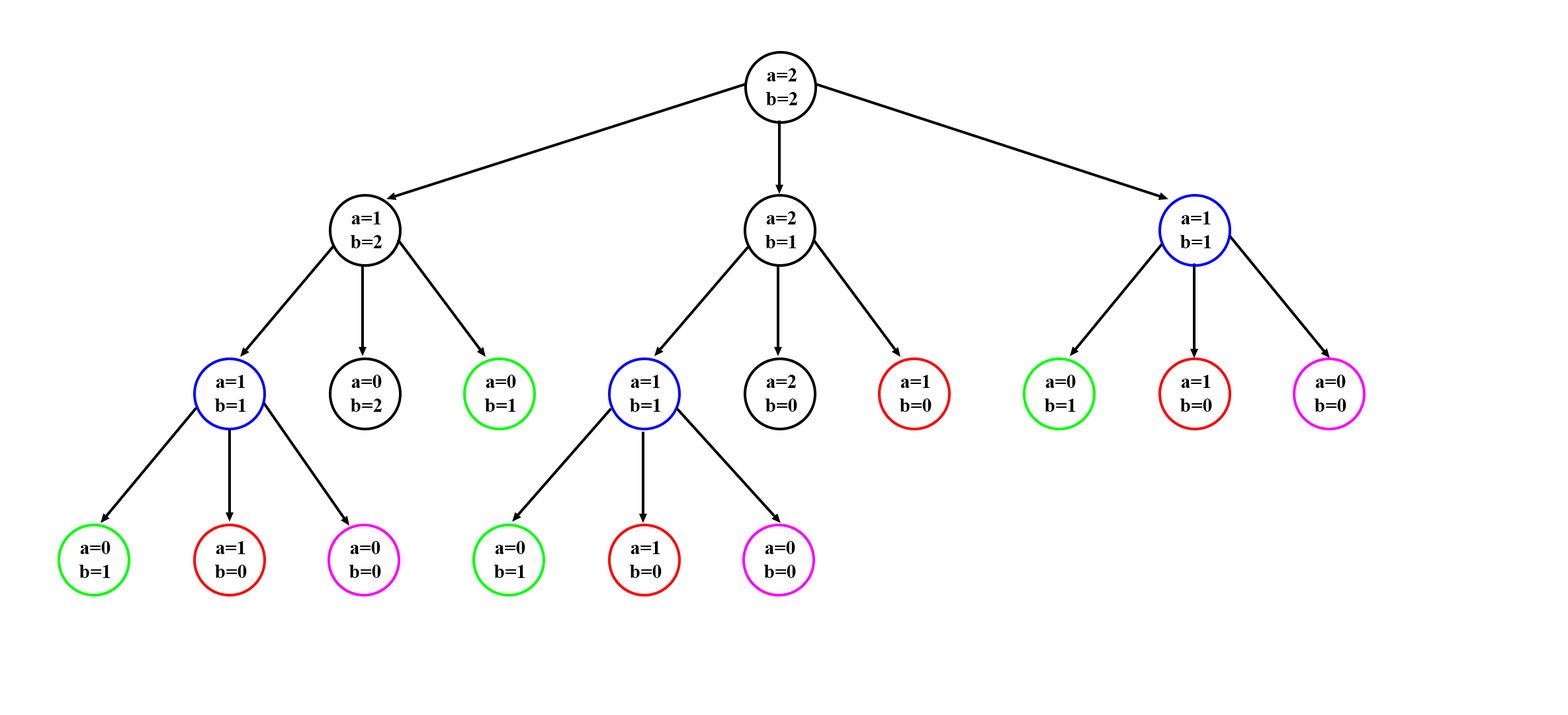
<style>
.page{position:relative;width:1568px;height:715px;background:#ffffff}
.page>*{position:absolute;margin:0}
.t1{font:19.8px "TimesNewRomanPS-BoldMT";color:#000000}
</style>
<div class="page">
<p class="t1" style="left:766px;top:68px;width:31px;height:37px;text-align:center">a=2<br>b=2</p>
<p class="t1" style="left:351px;top:211px;width:31px;height:37px;text-align:center">a=1<br>b=2</p>
<p class="t1" style="left:765px;top:211px;width:32px;height:37px;text-align:center">a=2<br>b=1</p>
<p class="t1" style="left:1180px;top:211px;width:31px;height:37px;text-align:center">a=1<br>b=1</p>
<p class="t1" style="left:215px;top:374px;width:31px;height:38px;text-align:center">a=1<br>b=1</p>
<p class="t1" style="left:351px;top:374px;width:31px;height:38px;text-align:center">a=0<br>b=2</p>
<p class="t1" style="left:485px;top:374px;width:31px;height:38px;text-align:center">a=0<br>b=1</p>
<p class="t1" style="left:630px;top:374px;width:31px;height:38px;text-align:center">a=1<br>b=1</p>
<p class="t1" style="left:765px;top:374px;width:32px;height:38px;text-align:center">a=2<br>b=0</p>
<p class="t1" style="left:900px;top:374px;width:32px;height:38px;text-align:center">a=1<br>b=0</p>
<p class="t1" style="left:1045px;top:374px;width:31px;height:38px;text-align:center">a=0<br>b=1</p>
<p class="t1" style="left:1180px;top:374px;width:32px;height:38px;text-align:center">a=1<br>b=0</p>
<p class="t1" style="left:1315px;top:374px;width:31px;height:38px;text-align:center">a=0<br>b=0</p>
<p class="t1" style="left:79px;top:541px;width:31px;height:37px;text-align:center">a=0<br>b=1</p>
<p class="t1" style="left:215px;top:541px;width:32px;height:37px;text-align:center">a=1<br>b=0</p>
<p class="t1" style="left:349px;top:541px;width:32px;height:37px;text-align:center">a=0<br>b=0</p>
<p class="t1" style="left:494px;top:541px;width:31px;height:37px;text-align:center">a=0<br>b=1</p>
<p class="t1" style="left:630px;top:541px;width:32px;height:37px;text-align:center">a=1<br>b=0</p>
<p class="t1" style="left:764px;top:541px;width:32px;height:37px;text-align:center">a=0<br>b=0</p>
</div>
